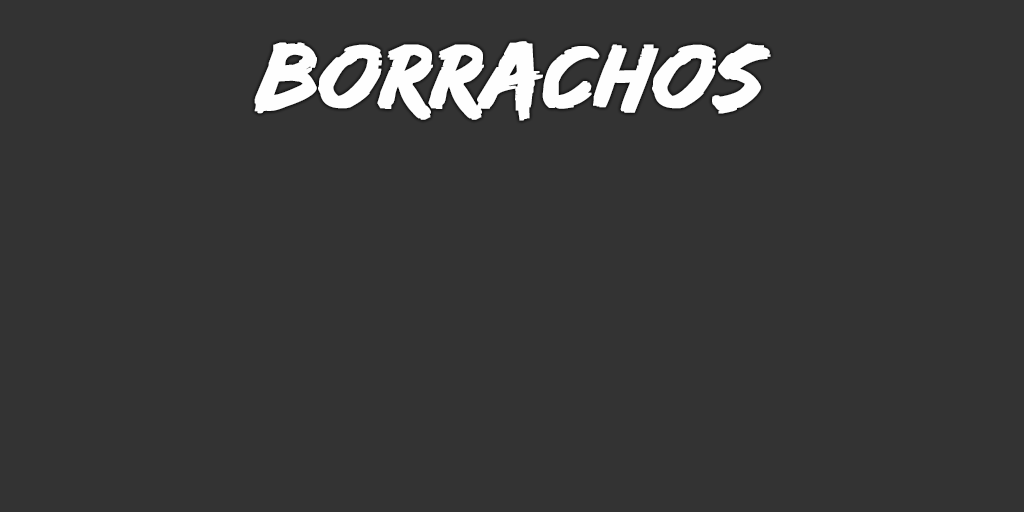
<style>
.page{position:relative;width:1024px;height:512px;background:#333333}
.page>*{position:absolute;margin:0}
.t1{font:94px "EdoSZ";color:#fefefe;font-weight:bold;font-style:italic;scale:1.04 1}
</style>
<div class="page">
<p class="t1" style="left:254px;top:41px;width:517px;height:80px">borrachos</p>
</div>
